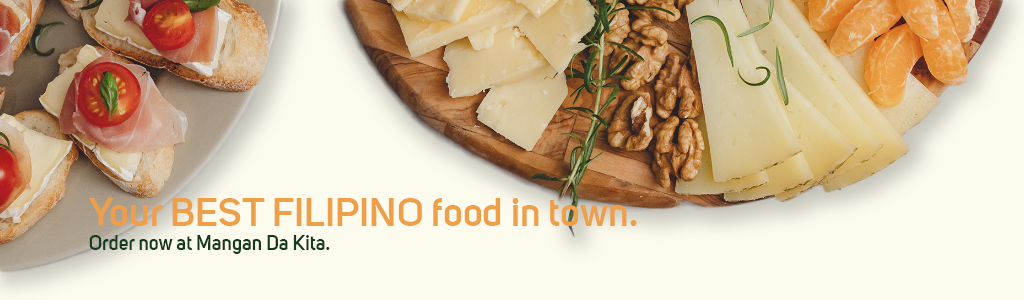
<style>
.page{position:relative;width:1024px;height:300px;background:#fcfbed}
.page>*{position:absolute;margin:0}
.t1{font:40px "UniSans-Trial-SemiBold";color:#ee9f4a}
.t2{font:20px "UniSans-Trial-SemiBold";color:#153a1e}
</style>
<div class="page">
<p class="t1" style="left:88px;top:198px;width:549px;height:56px">Your BEST FILIPINO food in town.<br><span class="t2">Order now at Mangan Da Kita.</span></p>
</div>
